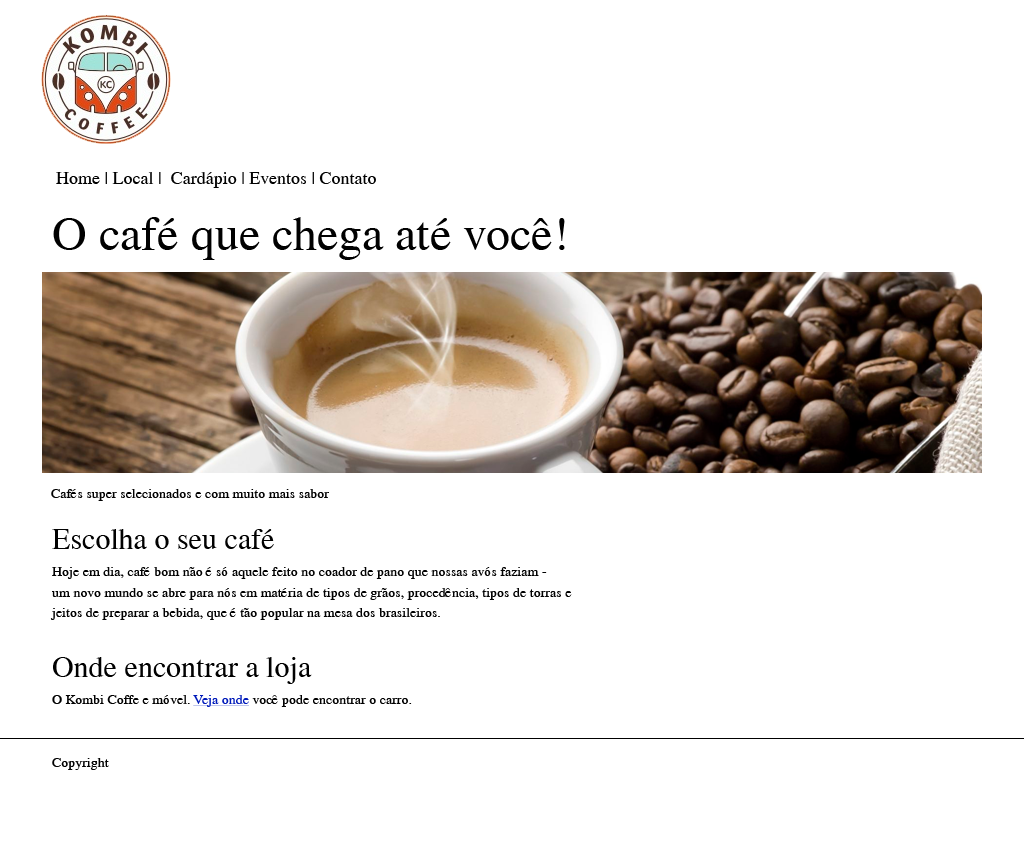
<style>
.page{position:relative;width:1024px;height:850px;background:#ffffff}
.page>*{position:absolute;margin:0}
.t1{font:18px "TimesRoman";color:#010101}
.t2{font:48px "TimesRoman";color:#010101}
.t3{font:14px "TimesRoman";color:#010101}
.t4{font:30px "TimesRoman";color:#010101}
.t5{font:14px "TimesRoman";color:#001aba;text-decoration:underline}
</style>
<div class="page">
<p class="t1" style="left:56px;top:172px;width:320px;height:16px">Home | Local |  Cardápio | Eventos | Contato</p>
<p class="t2" style="left:53px;top:217px;width:512px;height:43px">O café que chega até você!</p>
<p class="t3" style="left:51px;top:489px;width:278px;height:12px">Cafés super selecionados e com muito mais sabor</p>
<p class="t4" style="left:52px;top:529px;width:222px;height:20px">Escolha o seu café</p>
<p class="t3" style="left:50px;top:567px;width:522px;height:53px">Hoje em dia, café bom não é só aquele feito no coador de pano que nossas avós faziam - <br>um novo mundo se abre para nós em matéria de tipos de grãos, procedência, tipos de torras e <br>jeitos de preparar a bebida, que é tão popular na mesa dos brasileiros.</p>
<p class="t4" style="left:53px;top:657px;width:259px;height:27px">Onde encontrar a loja</p>
<p class="t3" style="left:52px;top:695px;width:360px;height:12px">O Kombi Coffe e móvel. <span class="t5">Veja onde</span> você pode encontrar o carro.</p>
<p class="t3" style="left:52px;top:758px;width:57px;height:12px">Copyright</p>
</div>
